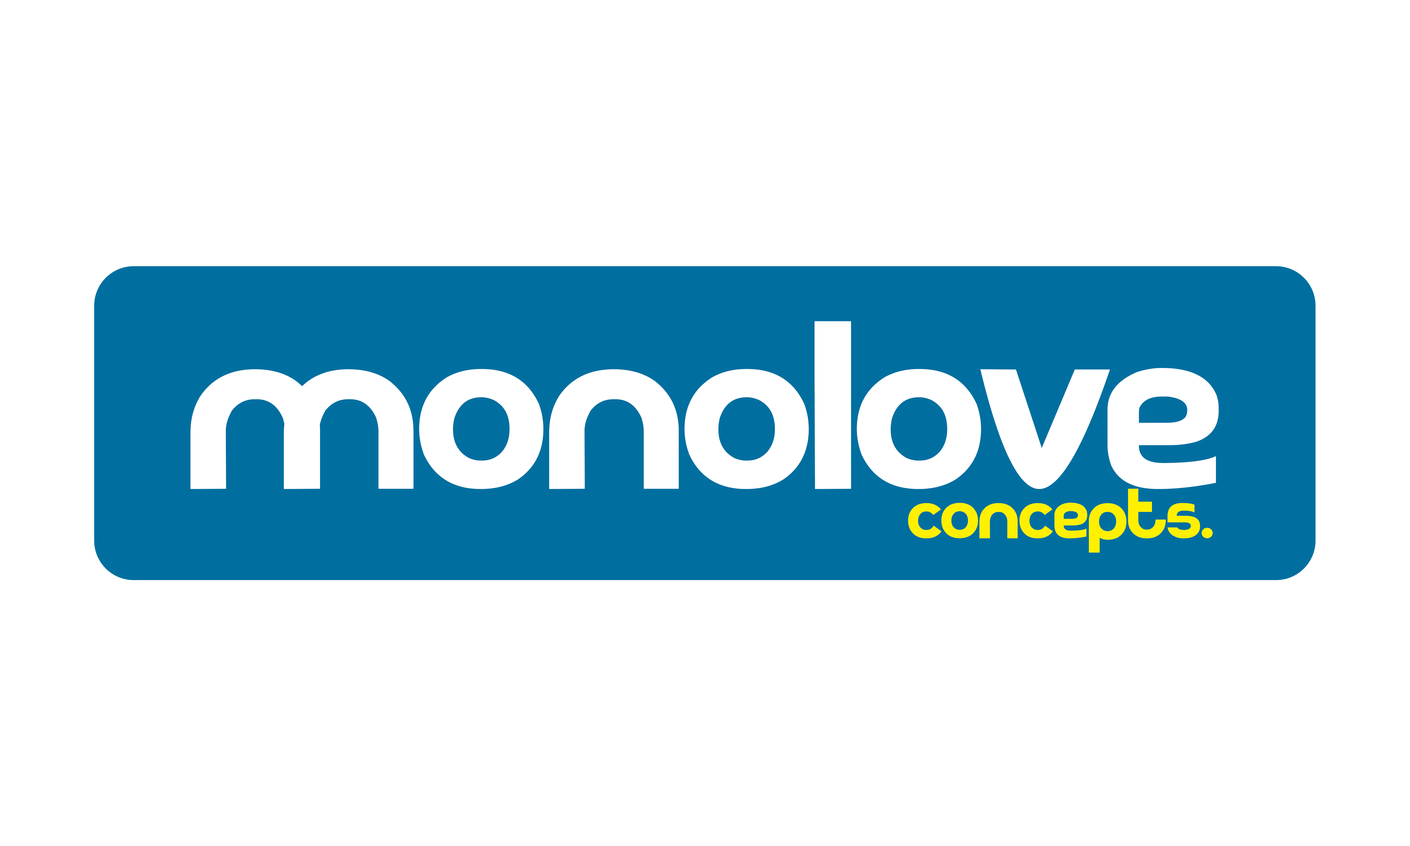
<style>
.page{position:relative;width:1410px;height:846px;background:#ffffff}
.page>*{position:absolute;margin:0}
.t1{font:239.4px "kodakku";letter-spacing:-0.01em;color:#ffffff}
.t2{font:70.5px "kodakku";letter-spacing:-0.01em;color:#fff000}
</style>
<div class="page">
<p class="t1" style="left:190px;top:321px;width:1029px;height:168px">monolove</p>
<p class="t2" style="left:908px;top:489px;width:305px;height:64px">concepts.</p>
</div>
